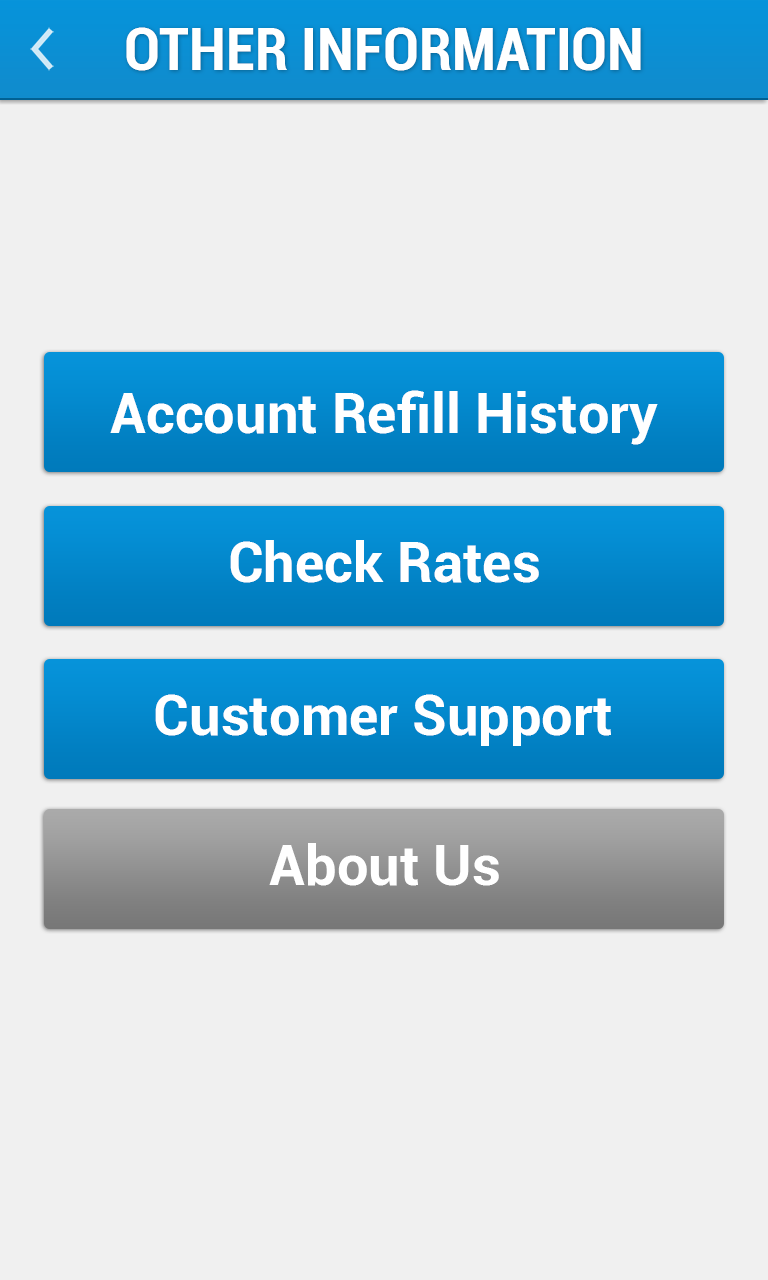
<style>
.page{position:relative;width:768px;height:1280px;background:#f0f0f0}
.page>*{position:absolute;margin:0}
.t1{font:60px "Roboto-BoldCondensed";color:#ffffff}
.t2{font:56px "Roboto-Bold";color:#ffffff}
</style>
<div class="page">
<p class="t1" style="left:126px;top:27px;width:515px;height:44px">OTHER INFORMATION</p>
<p class="t2" style="left:110px;top:390px;width:548px;height:55px">Account Refill History</p>
<p class="t2" style="left:230px;top:540px;width:309px;height:43px">Check Rates</p>
<p class="t2" style="left:155px;top:694px;width:456px;height:52px">Customer Support</p>
<p class="t2" style="left:269px;top:843px;width:230px;height:43px">About Us</p>
</div>
